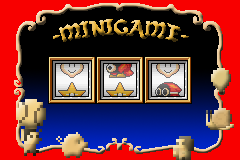
<style>
.page{position:relative;width:240px;height:160px;background:#000000}
.page>*{position:absolute;margin:0}
.t1{font:24px "EnchantedLand"}
</style>
<div class="page">
<p class="t1" style="left:53px;top:19px;width:136px;height:23px">- MINIGAME -</p>
</div>
